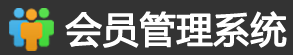
<style>
.page{position:relative;width:293px;height:55px;background:#333333}
.page>*{position:absolute;margin:0}
.t1{font:36px "MicrosoftYaHeiUI";color:#ffffff;font-weight:bold}
</style>
<div class="page">
<p class="t1" style="left:65px;top:11px;width:222px;height:37px">会员管理系统</p>
</div>
